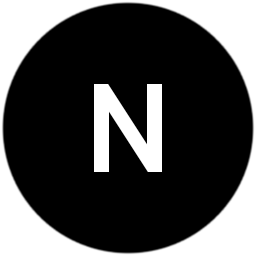
<style>
.page{position:relative;width:256px;height:256px;background:#000000}
.page>*{position:absolute;margin:0}
.t1{font:125px "Purista-SemiBold";color:#ffffff}
</style>
<div class="page">
<p class="t1" style="left:94px;top:84px;width:68px;height:88px">N</p>
</div>
